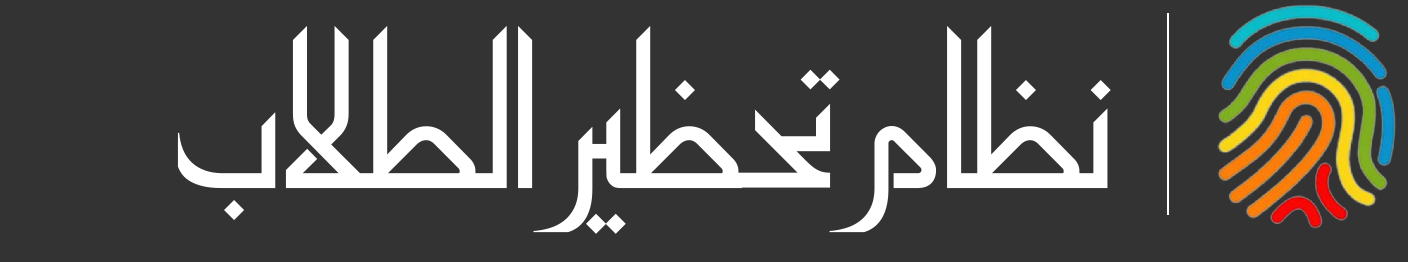
<style>
.page{position:relative;width:1408px;height:262px;background:#333333}
.page>*{position:absolute;margin:0}
.t1{font:229.2px "SakkalSetaPro";letter-spacing:-0.025em;color:#ffffff}
</style>
<div class="page">
<p class="t1" style="left:177px;top:25px;width:934px;height:209px">نظام تحظير الطلاب</p>
</div>
